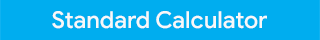
<style>
.page{position:relative;width:320px;height:40px;background:#00adef}
.page>*{position:absolute;margin:0}
.t1{font:23.3px "GoogleSans-Medium";color:#f8f8f8}
</style>
<div class="page">
<p class="t1" style="left:52px;top:11px;width:215px;height:18px">Standard Calculator</p>
</div>
